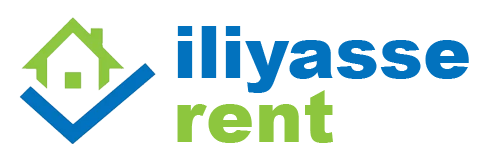
<style>
.page{position:relative;width:491px;height:163px;background:#ffffff}
.page>*{position:absolute;margin:0}
.t1{font:72px "Arial-Black";color:#0272be}
.t2{font:72px "Arial-Black";color:#8dc63e}
</style>
<div class="page">
<p class="t1" style="left:177px;top:26px;width:292px;height:67px">iliyasse</p>
<p class="t2" style="left:177px;top:90px;width:156px;height:53px">rent</p>
</div>
